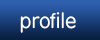
<style>
.page{position:relative;width:100px;height:40px}
.page>*{position:absolute;margin:0}
.t1{font:20px "BPreplay";color:#ffffff}
</style>
<div class="page">
<p class="t1" style="left:20px;top:12px;width:56px;height:21px">profile</p>
</div>
